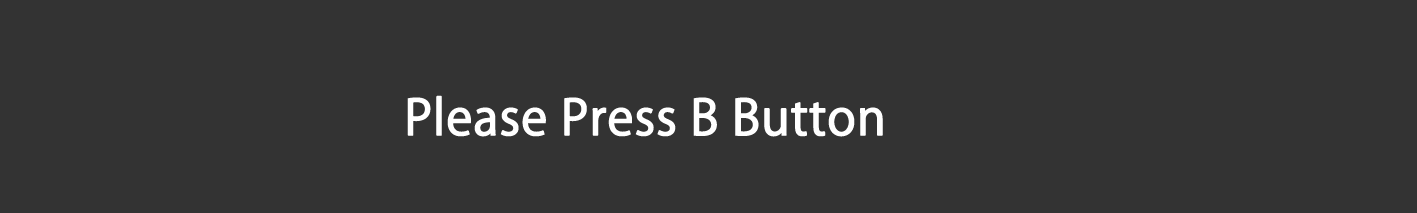
<style>
.page{position:relative;width:1417px;height:213px;background:#333333}
.page>*{position:absolute;margin:0}
.t1{font:48px "KozGoPr6N-Regular";color:#ffffff;font-weight:bold}
</style>
<div class="page">
<p class="t1" style="left:407px;top:95px;width:476px;height:42px">Please Press B Button</p>
</div>
